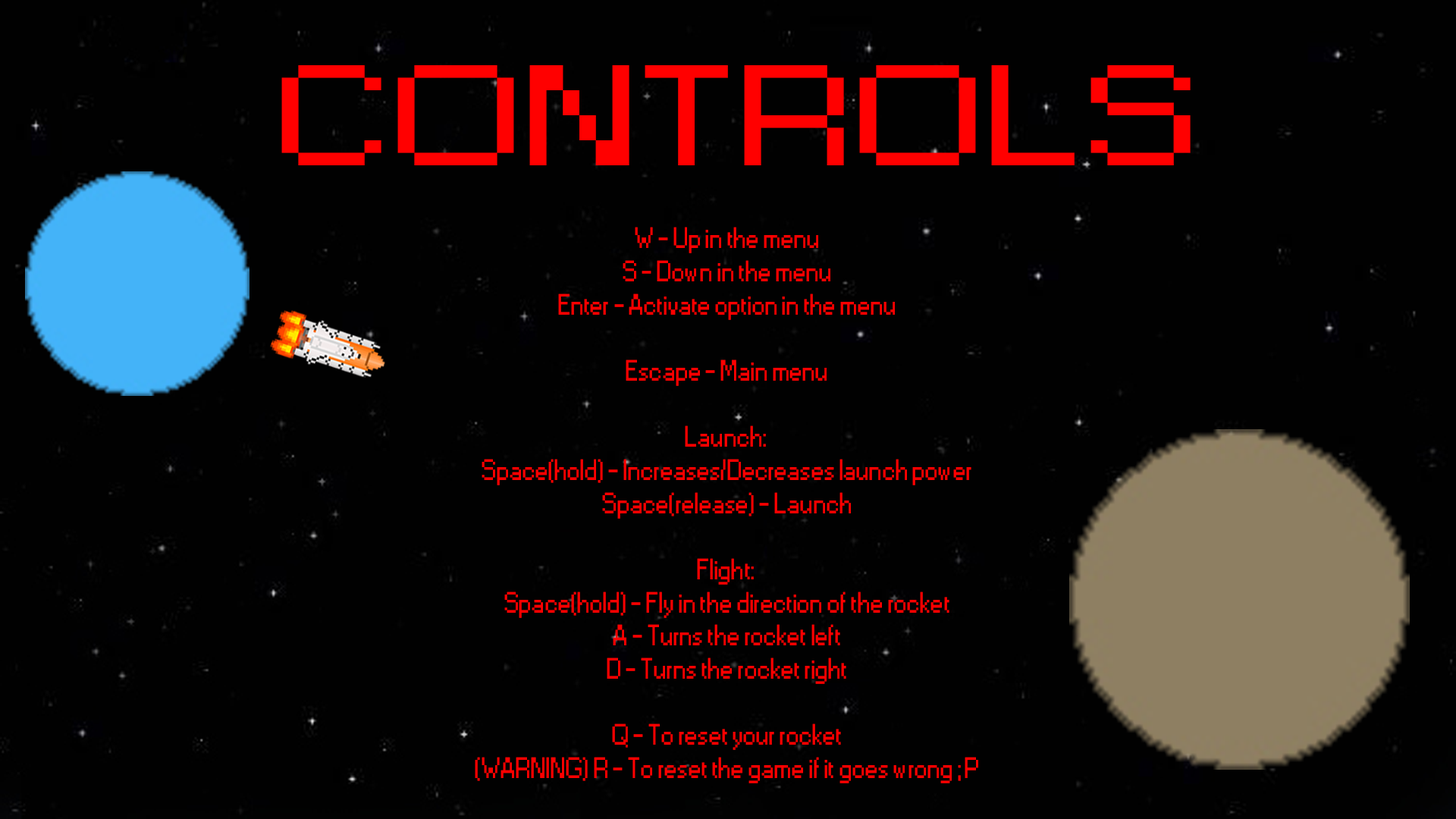
<style>
.page{position:relative;width:1456px;height:819px;background:#010101}
.page>*{position:absolute;margin:0}
.t1{font:133.4px "Small Fonts";color:#ff0000;scale:1.58 1}
.t2{font:27.6px "Small Fonts";color:#ff0000}
</style>
<div class="page">
<p class="t1" style="left:281px;top:65px;width:910px;height:100px">CONTROLS</p>
<p class="t2" style="left:475px;top:227px;width:503px;height:556px;text-align:center">W - Up in the menu<br>S - Down in the menu<br>Enter - Activate option in the menu<br><br>Escape - Main menu<br><br>Launch:<br>Space(hold) - Increases/Decreases launch power<br>Space(release) - Launch<br><br>Flight:<br>Space(hold) - Fly in the direction of the rocket<br>A - Turns the rocket left<br>D - Turns the rocket right<br><br>Q - To reset your rocket<br>(WARNING) R - To reset the game if it goes wrong ;P</p>
</div>
